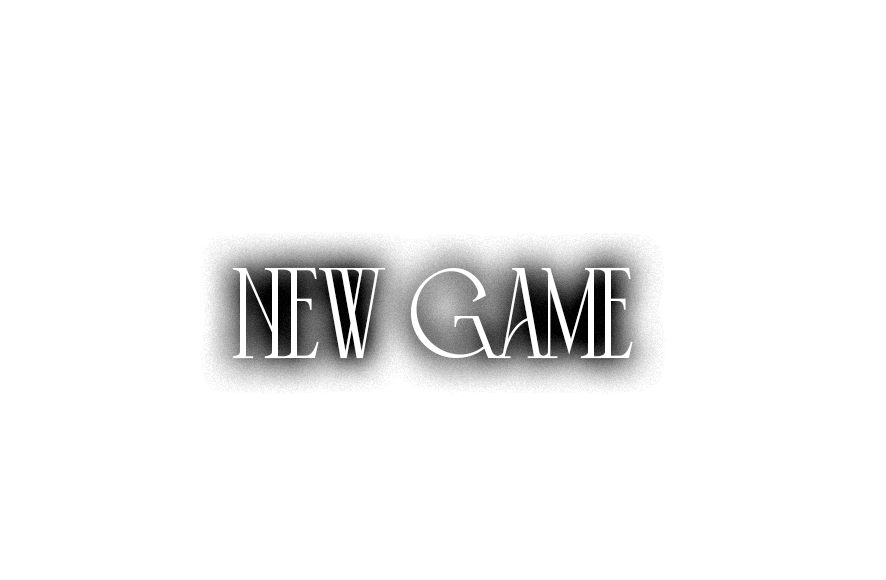
<style>
.page{position:relative;width:886px;height:580px;background:#ffffff}
.page>*{position:absolute;margin:0}
.t1{font:125px "Cyrano-DEMO";color:#ffffff}
</style>
<div class="page">
<p class="t1" style="left:232px;top:267px;width:401px;height:92px">new game</p>
</div>
